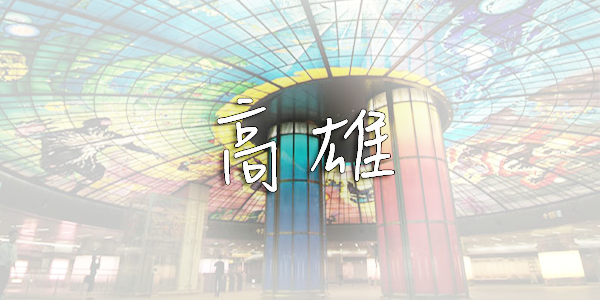
<style>
.page{position:relative;width:600px;height:300px}
.page>*{position:absolute;margin:0}
.t1{font:105.3px "DFHsiu-W3-WIN-BF";color:#fcfbfa}
</style>
<div class="page">
<p class="t1" style="left:217px;top:98px;width:177px;height:94px">高雄</p>
</div>
